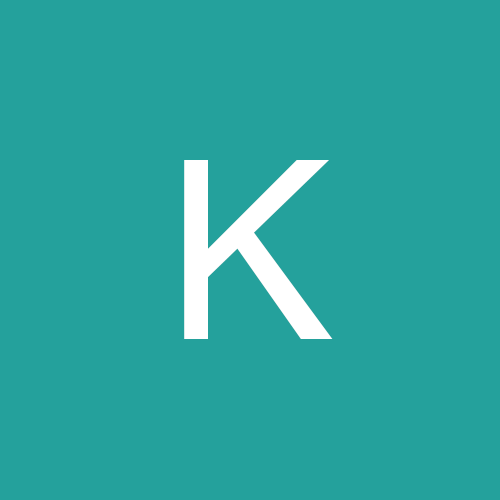
<style>
.page{position:relative;width:500px;height:500px;background:#24a19c}
.page>*{position:absolute;margin:0}
.t1{font:250px "ArialMT";color:#ffffff}
</style>
<div class="page">
<p class="t1" style="left:184px;top:160px;width:149px;height:179px">K</p>
</div>
